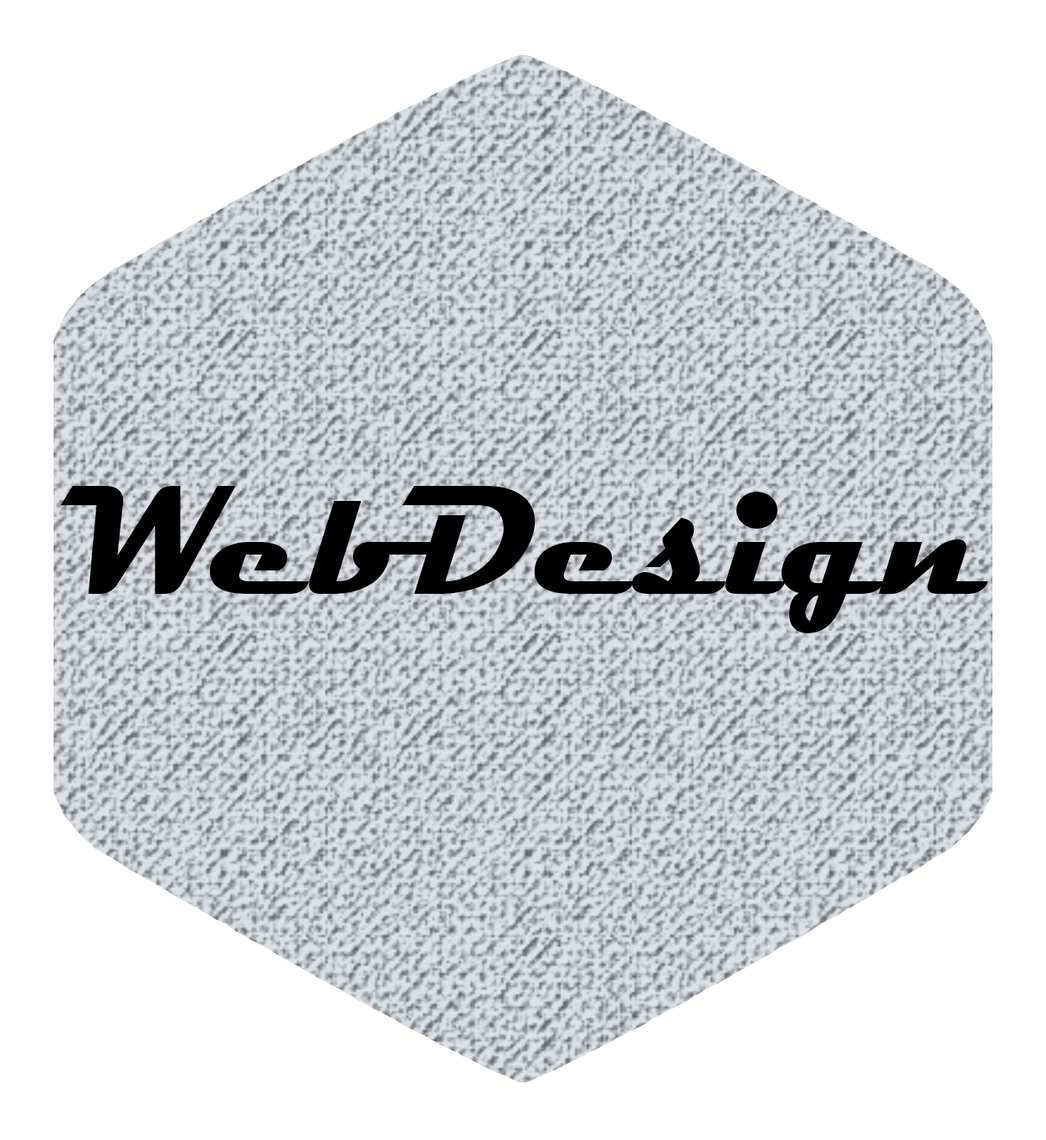
<style>
.page{position:relative;width:1046px;height:1140px;background:#ffffff}
.page>*{position:absolute;margin:0}
.t1{font:156.9px "Magneto-Bold";color:#000000}
</style>
<div class="page">
<p class="t1" style="left:60px;top:486px;width:928px;height:147px">WebDesign</p>
</div>
